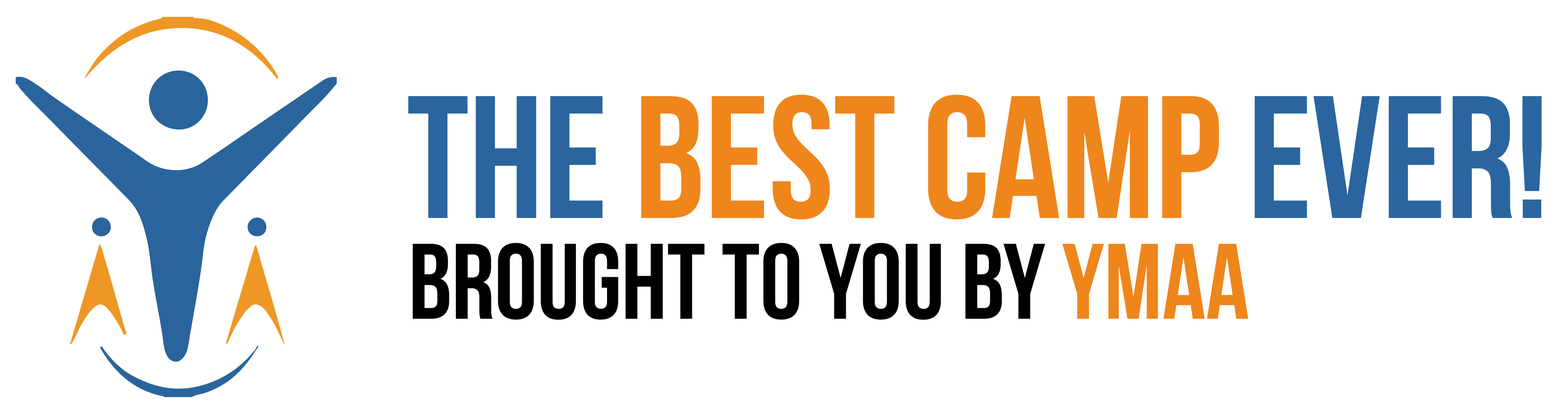
<style>
.page{position:relative;width:1568px;height:414px;background:#ffffff}
.page>*{position:absolute;margin:0}
.t1{font:174.1px "BebasNeueBold";color:#ee861c}
.t2{font:174.1px "BebasNeueBold";color:#2a659f}
.t3{font:107px "BebasNeueBold";color:#000000}
.t4{font:107px "BebasNeueBold";color:#ee861c}
</style>
<div class="page">
<p class="t1" style="left:408px;top:94px;width:1134px;height:126px"><span class="t2">The </span>best camp<span class="t2"> ever!</span></p>
<p class="t3" style="left:412px;top:243px;width:837px;height:77px">Brought to you by <span class="t4">YMAA</span></p>
</div>
